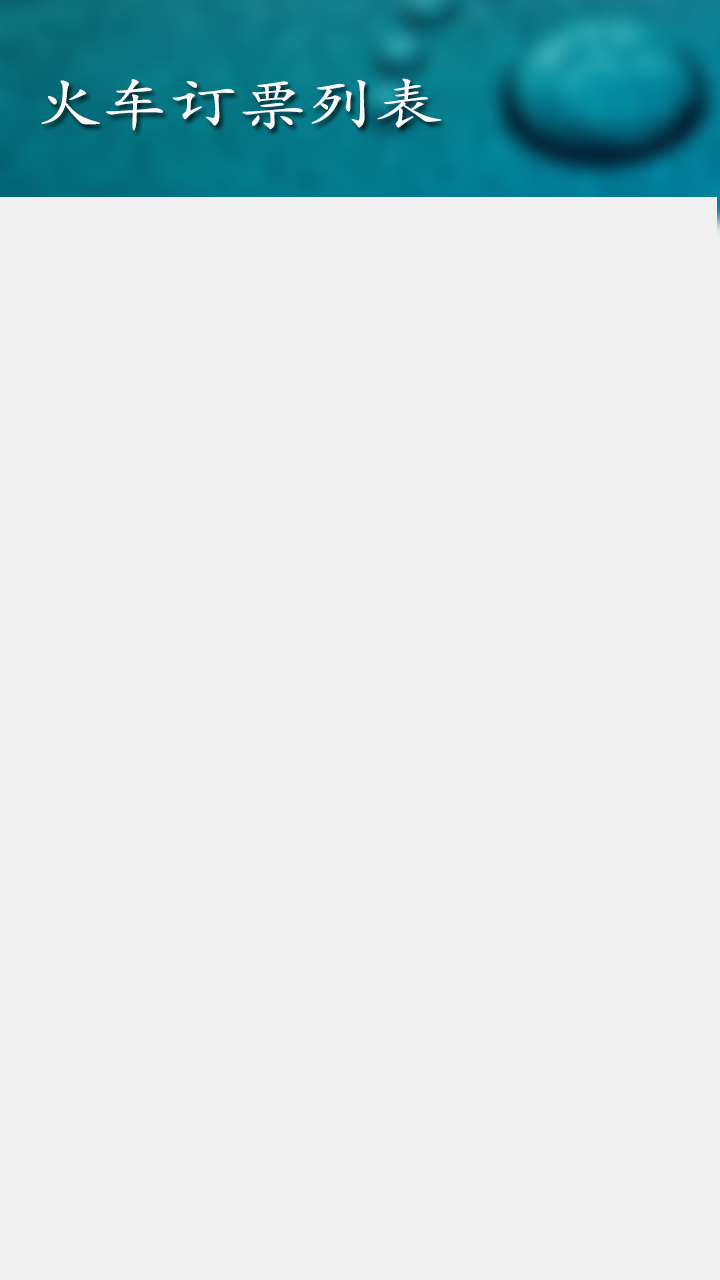
<style>
.page{position:relative;width:720px;height:1280px;background:#f0f0f0}
.page>*{position:absolute;margin:0}
.t1{font:55.6px "AdobeKaitiStd-Regular";letter-spacing:-0.02em;color:#fafafc;scale:1.26 1}
</style>
<div class="page">
<p class="t1" style="left:41px;top:78px;width:401px;height:53px">火车订票列表</p>
</div>
